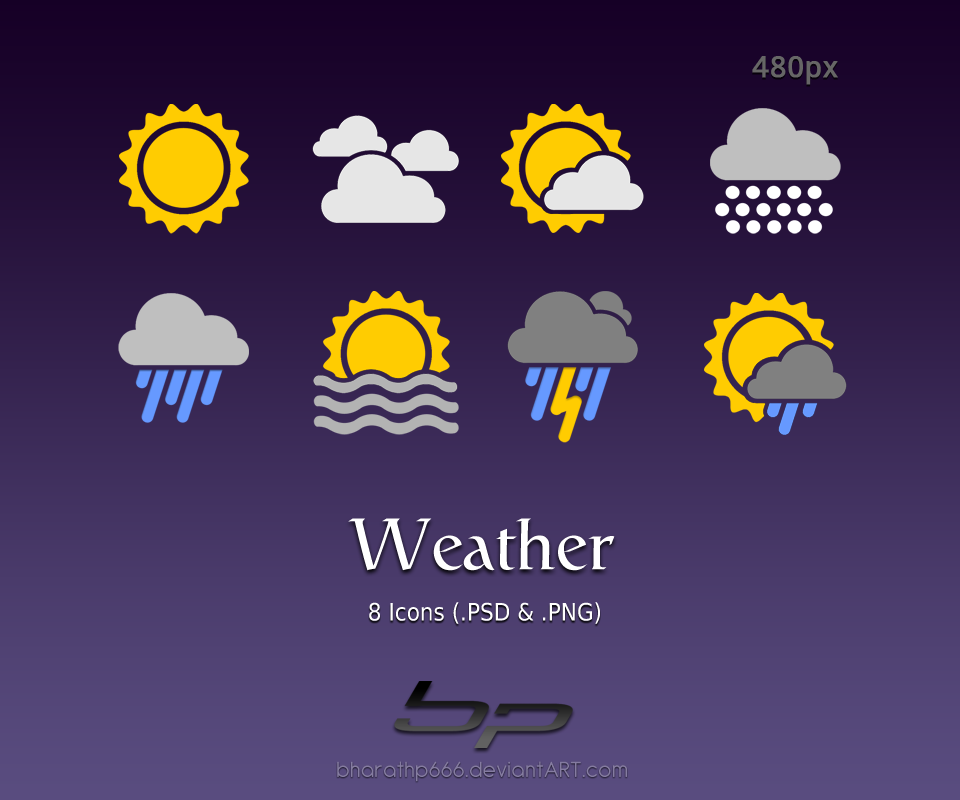
<style>
.page{position:relative;width:960px;height:800px}
.page>*{position:absolute;margin:0}
.t1{font:30px "DroidSans";color:#666666;font-weight:bold}
.t2{font:72px "Catull-Regular";color:#ffffff}
.t3{font:24px "DejaVuSansCondensed";color:#ffffff}
.t4{font:24px "Antipasto";letter-spacing:0.05em;color:#857ca1}
</style>
<div class="page">
<p class="t1" style="left:752px;top:56px;width:86px;height:29px">480px</p>
<p class="t2" style="left:348px;top:518px;width:267px;height:53px">Weather</p>
<p class="t3" style="left:369px;top:602px;width:231px;height:22px">8 Icons (.PSD &amp; .PNG)</p>
<p class="t4" style="left:337px;top:761px;width:290px;height:21px">bharathp666.deviantART.com</p>
</div>
